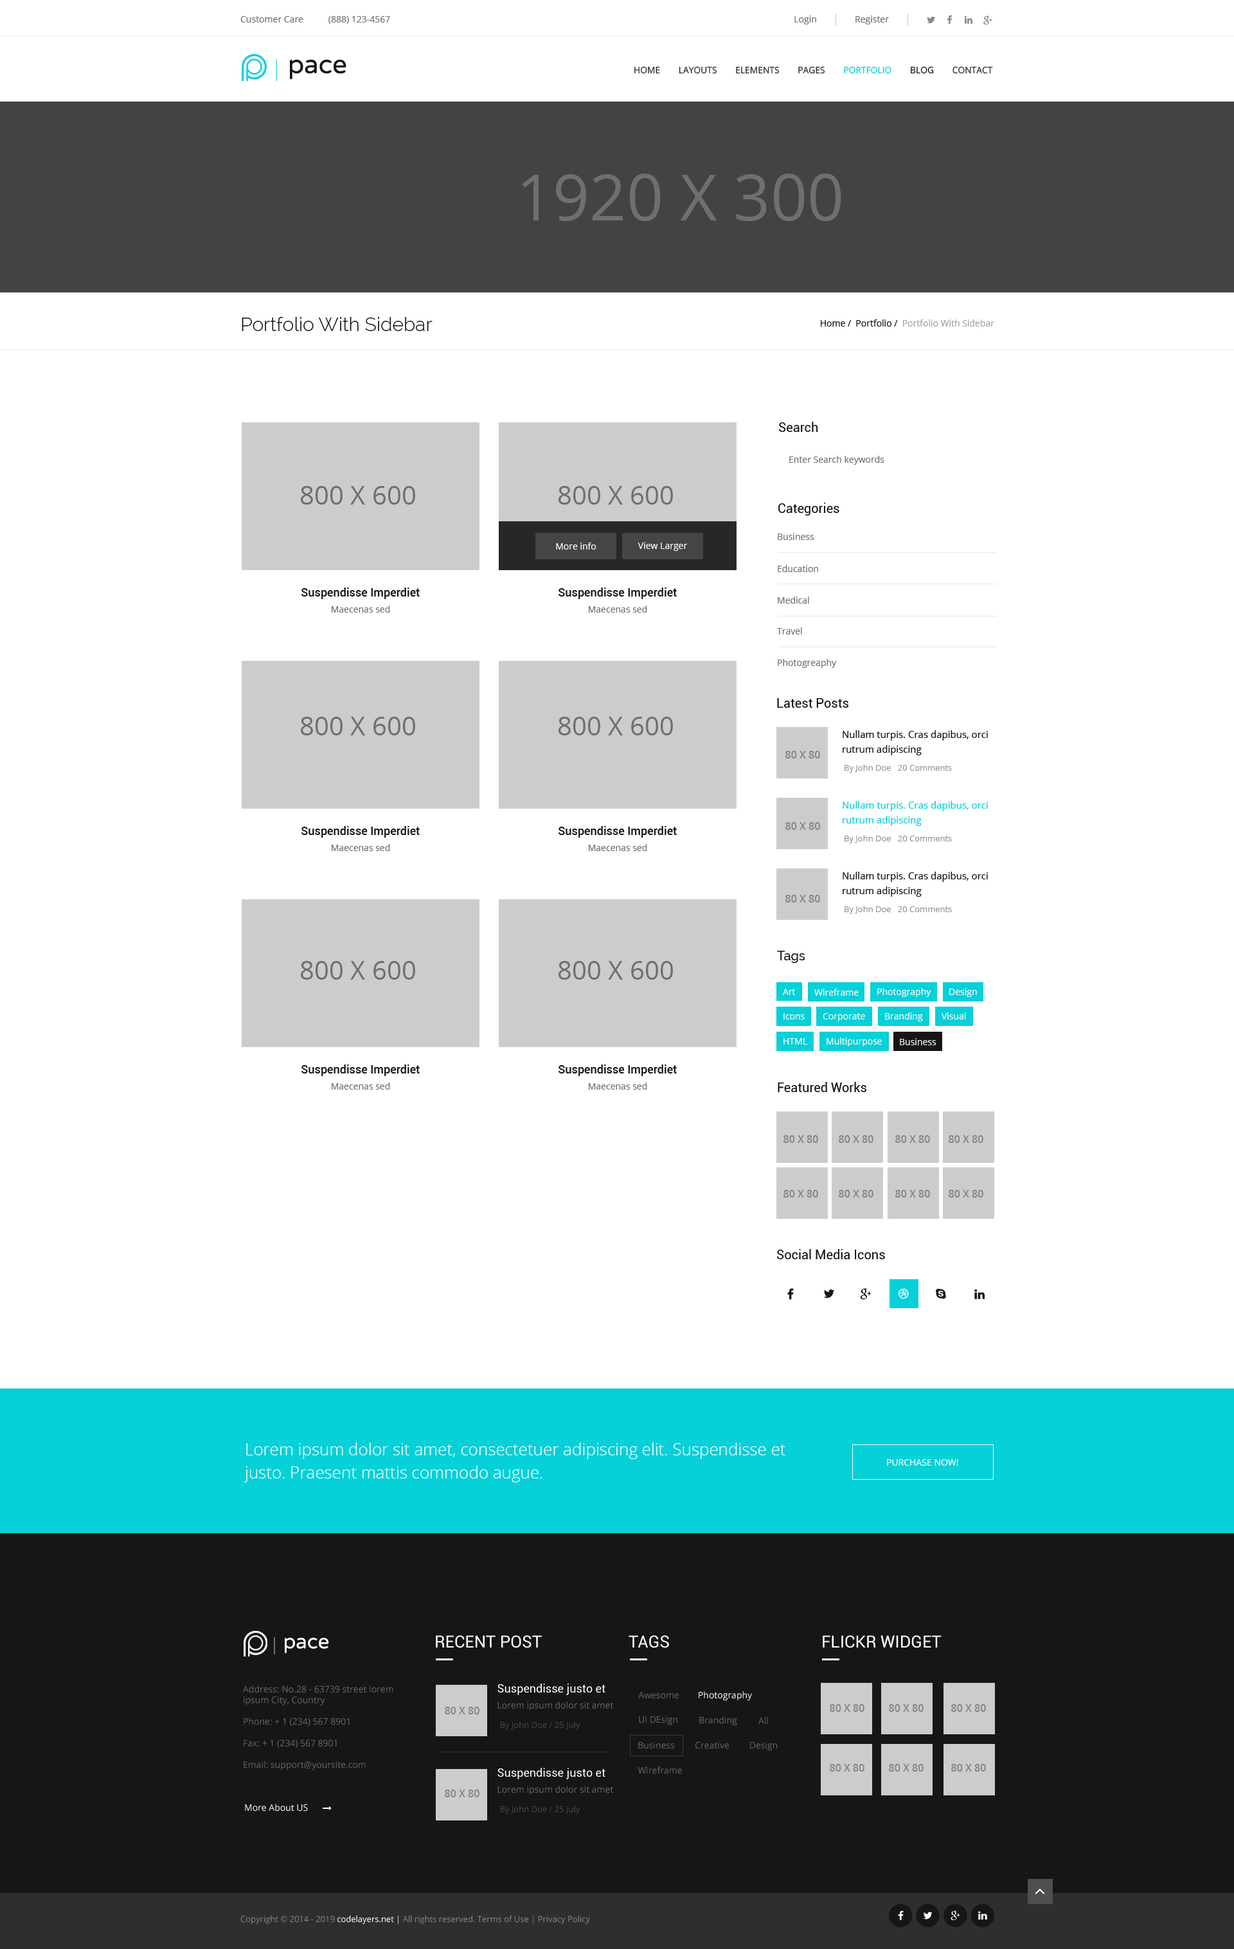
<style>
.page{position:relative;width:1234px;height:1949px;background:#ffffff}
.page>*{position:absolute;margin:0}
.t1{font:9px "OpenSans";color:#727272}
.t2{font:25.7px "VarelaRound-Regular";color:#161616}
.t3{font:9px "OpenSans";color:#272727;text-transform:uppercase}
.t4{font:9px "OpenSans";color:#06d0d8;text-transform:uppercase}
.t5{font:9px "OpenSans";color:#161616;text-transform:uppercase}
.t6{font:64.3px "OpenSans";color:#6f6f6f;text-transform:uppercase}
.t7{font:19.3px "Raleway-Light";color:#161616}
.t8{font:9px "OpenSans";color:#a4a4a4}
.t9{font:9px "OpenSans";color:#161616}
.t10{font:12.9px "Roboto-Regular";color:#161616}
.t11{font:25.7px "OpenSans";color:#706f6f;text-transform:uppercase}
.t12{font:9px "OpenSans";color:#ffffff}
.t13{font:11.6px "Roboto-Medium";color:#161616}
.t14{font:9.6px/14.8px "OpenSans";color:#161616}
.t15{font:10.3px "OpenSans-Semibold";color:#858585;text-transform:uppercase}
.t16{font:8.4px "OpenSans";color:#969696}
.t17{font:9.6px/14.8px "OpenSans";color:#06d0d8}
.t18{font:12.9px "Raleway-Medium";color:#161616}
.t19{font:16.7px/23.1px "OpenSans-Light";color:#ffffff}
.t20{font:9px "OpenSans";color:#ffffff;text-transform:uppercase}
.t21{font:20.2px "VarelaRound-Regular";color:#ffffff}
.t22{font:16.7px "Roboto-Regular";color:#ffffff;text-transform:uppercase}
.t23{font:9px "OpenSans";color:#666666}
.t24{font:11.6px "Roboto-Regular";color:#ffffff}
.t25{font:8.4px "OpenSans";color:#494747}
.t26{font:8.4px "OpenSans-Regular";color:#858585}
.t27{font:8.4px "OpenSans-Regular";color:#ffffff}
</style>
<div class="page">
<p class="t1" style="left:240px;top:16px;width:63px;height:6px">Customer Care</p>
<p class="t1" style="left:328px;top:16px;width:62px;height:8px">(888) 123-4567</p>
<p class="t1" style="left:795px;top:15px;width:21px;height:9px">Login</p>
<p class="t1" style="left:856px;top:15px;width:33px;height:9px">Register</p>
<p class="t2" style="left:290px;top:59px;width:56px;height:21px">pace</p>
<p class="t3" style="left:634px;top:66px;width:359px;height:8px">Home        layouts        elements        pages        <span class="t4">portfolio        </span><span class="t5">blog</span>        contact</p>
<p class="t6" style="left:522px;top:174px;width:320px;height:47px">1920 x 300</p>
<p class="t7" style="left:242px;top:317px;width:191px;height:14px">Portfolio With Sidebar</p>
<p class="t8" style="left:821px;top:320px;width:174px;height:7px"><span class="t9">Home /  Portfolio /  </span>Portfolio With Sidebar</p>
<p class="t10" style="left:779px;top:422px;width:39px;height:10px">Search</p>
<p class="t1" style="left:789px;top:456px;width:96px;height:9px">Enter Search keywords</p>
<p class="t11" style="left:301px;top:486px;width:114px;height:19px">800 x 600</p>
<p class="t11" style="left:559px;top:486px;width:114px;height:19px">800 x 600</p>
<p class="t10" style="left:779px;top:503px;width:61px;height:13px">Categories</p>
<p class="t1" style="left:778px;top:533px;width:37px;height:7px">Business</p>
<p class="t12" style="left:556px;top:543px;width:40px;height:7px">More info</p>
<p class="t12" style="left:638px;top:542px;width:50px;height:9px">View Larger</p>
<p class="t1" style="left:778px;top:565px;width:40px;height:7px">Education</p>
<p class="t13" style="left:302px;top:588px;width:118px;height:11px">Suspendisse Imperdiet</p>
<p class="t13" style="left:559px;top:588px;width:118px;height:11px">Suspendisse Imperdiet</p>
<p class="t1" style="left:332px;top:606px;width:58px;height:7px">Maecenas sed</p>
<p class="t1" style="left:589px;top:606px;width:58px;height:7px">Maecenas sed</p>
<p class="t1" style="left:778px;top:597px;width:31px;height:7px">Medical</p>
<p class="t1" style="left:777px;top:627px;width:25px;height:7px">Travel</p>
<p class="t1" style="left:778px;top:659px;width:59px;height:9px">Photogreaphy</p>
<p class="t10" style="left:777px;top:698px;width:72px;height:10px">Latest Posts</p>
<p class="t11" style="left:301px;top:717px;width:114px;height:18px">800 x 600</p>
<p class="t11" style="left:559px;top:717px;width:114px;height:18px">800 x 600</p>
<p class="t14" style="left:843px;top:730px;width:145px;height:25px">Nullam turpis. Cras dapibus, orci rutrum adipiscing</p>
<p class="t15" style="left:786px;top:751px;width:34px;height:8px">80 x 80</p>
<p class="t16" style="left:845px;top:764px;width:107px;height:9px">By John Doe   20 Comments</p>
<p class="t17" style="left:843px;top:801px;width:145px;height:25px">Nullam turpis. Cras dapibus, orci rutrum adipiscing</p>
<p class="t13" style="left:302px;top:826px;width:118px;height:12px">Suspendisse Imperdiet</p>
<p class="t13" style="left:559px;top:826px;width:118px;height:12px">Suspendisse Imperdiet</p>
<p class="t15" style="left:786px;top:822px;width:34px;height:8px">80 x 80</p>
<p class="t1" style="left:332px;top:844px;width:58px;height:7px">Maecenas sed</p>
<p class="t1" style="left:589px;top:844px;width:58px;height:7px">Maecenas sed</p>
<p class="t16" style="left:845px;top:835px;width:107px;height:8px">By John Doe   20 Comments</p>
<p class="t14" style="left:843px;top:872px;width:145px;height:25px">Nullam turpis. Cras dapibus, orci rutrum adipiscing</p>
<p class="t15" style="left:786px;top:895px;width:34px;height:8px">80 x 80</p>
<p class="t16" style="left:845px;top:906px;width:107px;height:8px">By John Doe   20 Comments</p>
<p class="t18" style="left:777px;top:951px;width:29px;height:12px">Tags</p>
<p class="t11" style="left:301px;top:961px;width:114px;height:19px">800 x 600</p>
<p class="t11" style="left:559px;top:961px;width:114px;height:19px">800 x 600</p>
<p class="t12" style="left:783px;top:989px;width:13px;height:6px">Art</p>
<p class="t12" style="left:815px;top:989px;width:44px;height:7px">Wireframe</p>
<p class="t12" style="left:878px;top:988px;width:54px;height:9px">Photography</p>
<p class="t12" style="left:950px;top:988px;width:27px;height:9px">Design</p>
<p class="t12" style="left:784px;top:1013px;width:21px;height:7px">Icons</p>
<p class="t12" style="left:823px;top:1013px;width:42px;height:9px">Corporate</p>
<p class="t12" style="left:885px;top:1013px;width:38px;height:9px">Branding</p>
<p class="t12" style="left:942px;top:1013px;width:24px;height:7px">Visual</p>
<p class="t12" style="left:827px;top:1038px;width:55px;height:9px">Multipurpose</p>
<p class="t12" style="left:784px;top:1038px;width:23px;height:7px">HTML</p>
<p class="t12" style="left:900px;top:1038px;width:37px;height:7px">Business</p>
<p class="t13" style="left:302px;top:1065px;width:118px;height:11px">Suspendisse Imperdiet</p>
<p class="t13" style="left:559px;top:1065px;width:118px;height:11px">Suspendisse Imperdiet</p>
<p class="t1" style="left:332px;top:1083px;width:58px;height:7px">Maecenas sed</p>
<p class="t1" style="left:589px;top:1083px;width:58px;height:7px">Maecenas sed</p>
<p class="t10" style="left:778px;top:1082px;width:89px;height:10px">Featured Works</p>
<p class="t15" style="left:784px;top:1135px;width:34px;height:8px">80 x 80</p>
<p class="t15" style="left:839px;top:1135px;width:35px;height:8px">80 x 80</p>
<p class="t15" style="left:896px;top:1135px;width:34px;height:8px">80 x 80</p>
<p class="t15" style="left:949px;top:1135px;width:35px;height:8px">80 x 80</p>
<p class="t15" style="left:784px;top:1190px;width:34px;height:8px">80 x 80</p>
<p class="t15" style="left:839px;top:1190px;width:35px;height:8px">80 x 80</p>
<p class="t15" style="left:896px;top:1190px;width:34px;height:8px">80 x 80</p>
<p class="t15" style="left:949px;top:1190px;width:35px;height:8px">80 x 80</p>
<p class="t10" style="left:777px;top:1249px;width:108px;height:10px">Social Media Icons</p>
<p class="t19" style="left:244px;top:1443px;width:542px;height:39px">Lorem ipsum dolor sit amet, consectetuer adipiscing elit. Suspendisse et justo. Praesent mattis commodo augue.</p>
<p class="t20" style="left:887px;top:1459px;width:72px;height:7px">Purchase now!</p>
<p class="t21" style="left:285px;top:1637px;width:44px;height:16px">pace</p>
<p class="t22" style="left:436px;top:1635px;width:106px;height:13px">Recent Post</p>
<p class="t22" style="left:629px;top:1635px;width:40px;height:13px">Tags</p>
<p class="t22" style="left:823px;top:1635px;width:119px;height:13px">Flickr Widget</p>
<p class="t23" style="left:243px;top:1686px;width:150px;height:84px">Address: No.28 - 63739 street lorem ipsum City, Country<br><br>Phone: + 1 (234) 567 8901<br><br>Fax: + 1 (234) 567 8901<br><br>Email: support@yoursite.com</p>
<p class="t24" style="left:498px;top:1684px;width:108px;height:11px">Suspendisse justo et</p>
<p class="t23" style="left:638px;top:1692px;width:41px;height:7px">Awesome</p>
<p class="t12" style="left:699px;top:1691px;width:53px;height:10px">Photography</p>
<p class="t15" style="left:445px;top:1707px;width:35px;height:8px">80 x 80</p>
<p class="t23" style="left:498px;top:1702px;width:116px;height:9px">Lorem ipsum dolor sit amet</p>
<p class="t15" style="left:830px;top:1704px;width:35px;height:8px">80 x 80</p>
<p class="t15" style="left:889px;top:1704px;width:35px;height:8px">80 x 80</p>
<p class="t15" style="left:951px;top:1704px;width:35px;height:8px">80 x 80</p>
<p class="t25" style="left:500px;top:1722px;width:80px;height:8px">By John Doe / 25 July</p>
<p class="t23" style="left:639px;top:1716px;width:39px;height:9px">UI DEsign</p>
<p class="t23" style="left:699px;top:1716px;width:38px;height:10px">Branding</p>
<p class="t23" style="left:759px;top:1717px;width:9px;height:7px">All</p>
<p class="t23" style="left:638px;top:1742px;width:37px;height:7px">Business</p>
<p class="t23" style="left:696px;top:1742px;width:33px;height:7px">Creative</p>
<p class="t23" style="left:750px;top:1742px;width:28px;height:9px">Design</p>
<p class="t24" style="left:498px;top:1768px;width:108px;height:11px">Suspendisse justo et</p>
<p class="t23" style="left:638px;top:1767px;width:44px;height:7px">Wireframe</p>
<p class="t15" style="left:830px;top:1764px;width:35px;height:8px">80 x 80</p>
<p class="t15" style="left:889px;top:1764px;width:35px;height:8px">80 x 80</p>
<p class="t15" style="left:951px;top:1764px;width:35px;height:8px">80 x 80</p>
<p class="t15" style="left:445px;top:1790px;width:35px;height:7px">80 x 80</p>
<p class="t23" style="left:498px;top:1786px;width:116px;height:9px">Lorem ipsum dolor sit amet</p>
<p class="t12" style="left:245px;top:1804px;width:63px;height:8px">More About US</p>
<p class="t25" style="left:500px;top:1806px;width:80px;height:8px">By John Doe / 25 July</p>
<p class="t26" style="left:240px;top:1916px;width:350px;height:8px">Copyright © 2014 - 2019 <span class="t27">codelayers.net |</span> All rights reserved. Terms of Use | Privacy Policy</p>
</div>
